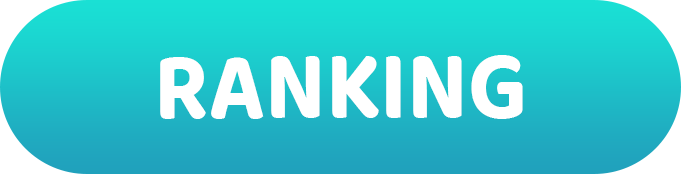
<style>
.page{position:relative;width:681px;height:174px}
.page>*{position:absolute;margin:0}
.t1{font:98.5px "BalooThambi2-Bold";color:#ffffff;scale:0.91 1}
</style>
<div class="page">
<p class="t1" style="left:160px;top:55px;width:363px;height:64px">RANKING</p>
</div>
